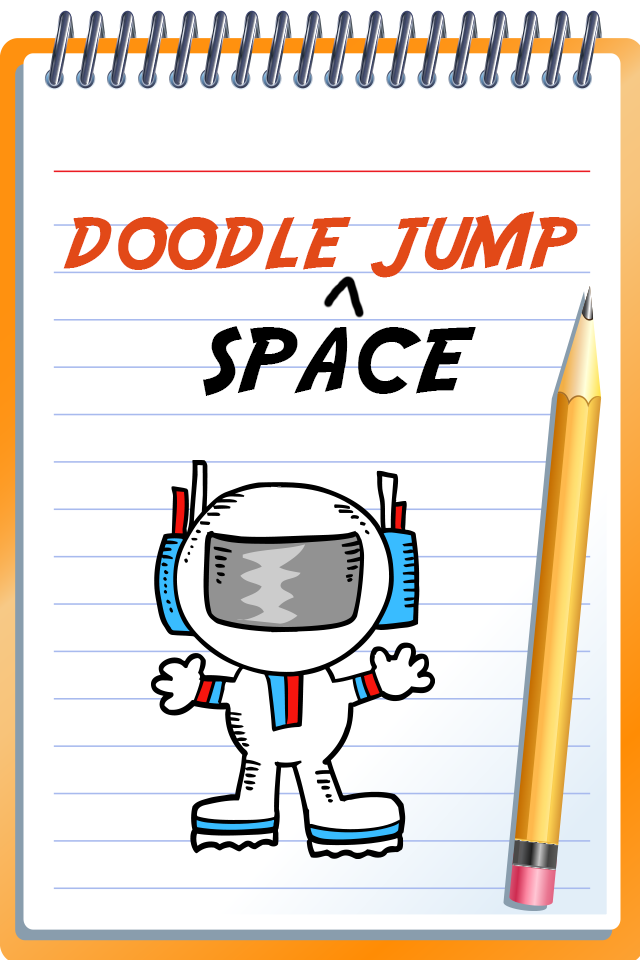
<style>
.page{position:relative;width:640px;height:960px;background:#ffffff}
.page>*{position:absolute;margin:0}
.t1{font:80px "AdventureNormal";color:#e24918}
.t2{font:100px "AdventureNormal";color:#000000}
</style>
<div class="page">
<p class="t1" style="left:63px;top:211px;width:515px;height:67px">DOODLE JUMP</p>
<p class="t2" style="left:203px;top:326px;width:273px;height:70px">SPACE</p>
</div>
